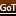
<style>
.page{position:relative;width:16px;height:16px}
.page>*{position:absolute;margin:0}
.t1{font:10px "MyriadPro-Regular";color:#f7f7f9}
</style>
<div class="page">
<p class="t1" style="left:0px;top:4px;width:17px;height:7px">GoT</p>
</div>
